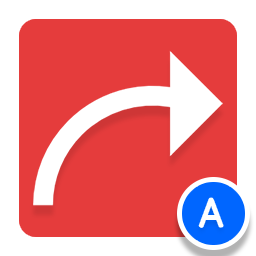
<style>
.page{position:relative;width:256px;height:256px;background:#e53c3c}
.page>*{position:absolute;margin:0}
.t1{font:37.3px "Roboto-Thin";color:#ffffff}
</style>
<div class="page">
<p class="t1" style="left:200px;top:199px;width:22px;height:27px">A</p>
</div>
